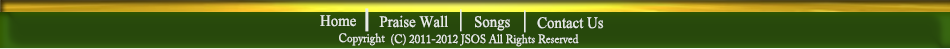
<style>
.page{position:relative;width:950px;height:49px;background:#27480c}
.page>*{position:absolute;margin:0}
.t1{font:16px "TimesNewRomanPSMT";color:#e7ebe5;scale:0.93 1}
.t2{font:24px "Arial-BoldMT";color:#e7ebe5;scale:0.93 1}
.t3{font:24px "TimesNewRomanPS-BoldMT";color:#e7ebe5;scale:0.93 1}
.t4{font:12px "ACaslonPro-Regular";color:#e7ebe5;scale:0.93 1}
</style>
<div class="page">
<p class="t1" style="left:320px;top:15px;width:36px;height:12px">Home</p>
<p class="t2" style="left:365px;top:8px;width:4px;height:24px">|</p>
<p class="t1" style="left:379px;top:15px;width:69px;height:13px">Praise Wall</p>
<p class="t3" style="left:460px;top:9px;width:2px;height:23px">|</p>
<p class="t1" style="left:475px;top:16px;width:35px;height:15px">Songs</p>
<p class="t3" style="left:524px;top:10px;width:2px;height:23px">|</p>
<p class="t1" style="left:537px;top:17px;width:67px;height:12px">Contact Us</p>
<p class="t4" style="left:339px;top:33px;width:46px;height:13px">Copyright</p>
<p class="t4" style="left:391px;top:34px;width:188px;height:13px">(C) 2011-2012 JSOS All Rights Reserved</p>
</div>
